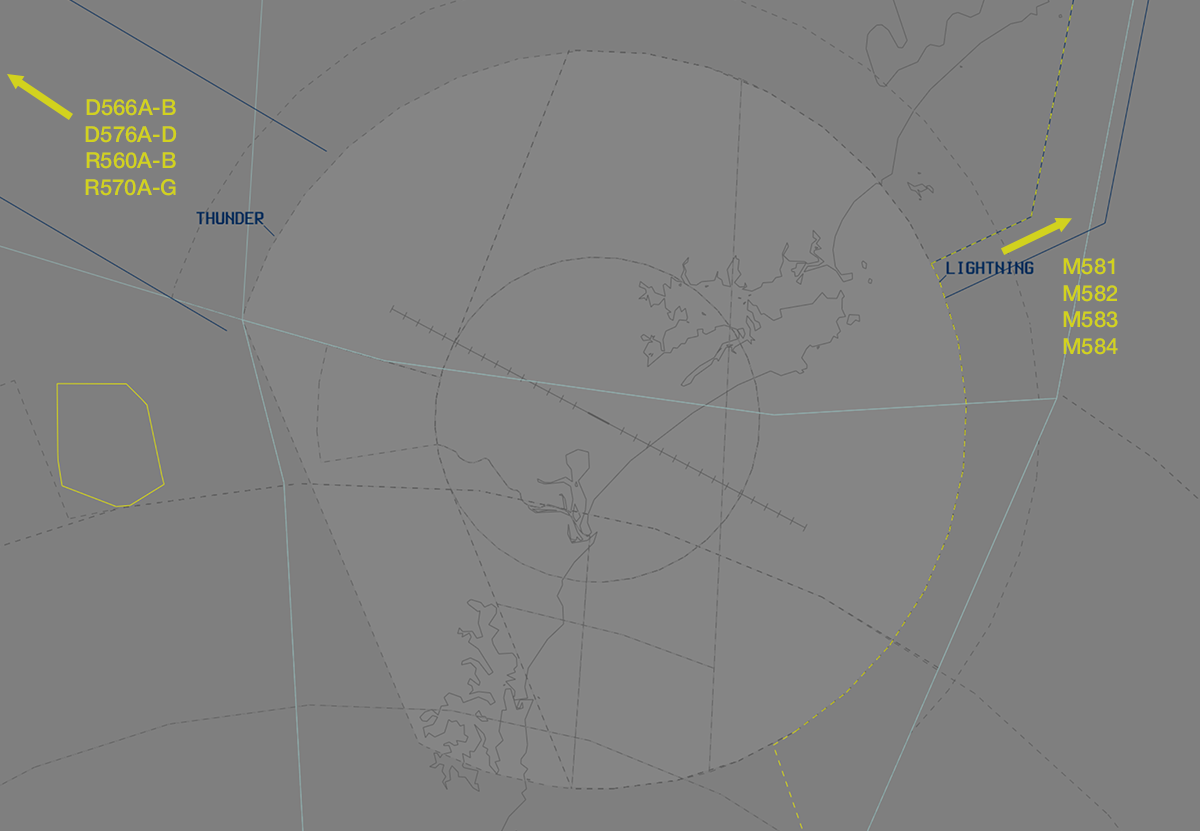
<style>
.page{position:relative;width:1200px;height:831px;background:#7f7f7f}
.page>*{position:absolute;margin:0}
.t1{font:22.2px "HelveticaNeue-Medium";color:#d2d21e}
</style>
<div class="page">
<p class="t1" style="left:85px;top:99px;width:92px;height:97px;text-align:center">D566A-B<br>D576A-D<br>R560A-B<br>R570A-G</p>
<p class="t1" style="left:1063px;top:258px;width:55px;height:97px;text-align:center">M581<br>M582<br>M583<br>M584</p>
</div>
